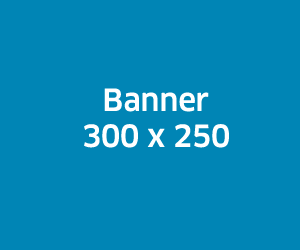
<style>
.page{position:relative;width:300px;height:250px;background:#0085b5}
.page>*{position:absolute;margin:0}
.t1{font:30px "Clan-Medium";color:#ffffff}
</style>
<div class="page">
<p class="t1" style="left:84px;top:88px;width:145px;height:60px;text-align:center">Banner<br>300 x 250</p>
</div>
